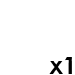
<style>
.page{position:relative;width:75px;height:75px;background:#ffffff}
.page>*{position:absolute;margin:0}
.t1{font:24px "CenturyGothic-Bold";color:#000000}
</style>
<div class="page">
<p class="t1" style="left:49px;top:57px;width:23px;height:17px">x1</p>
</div>
